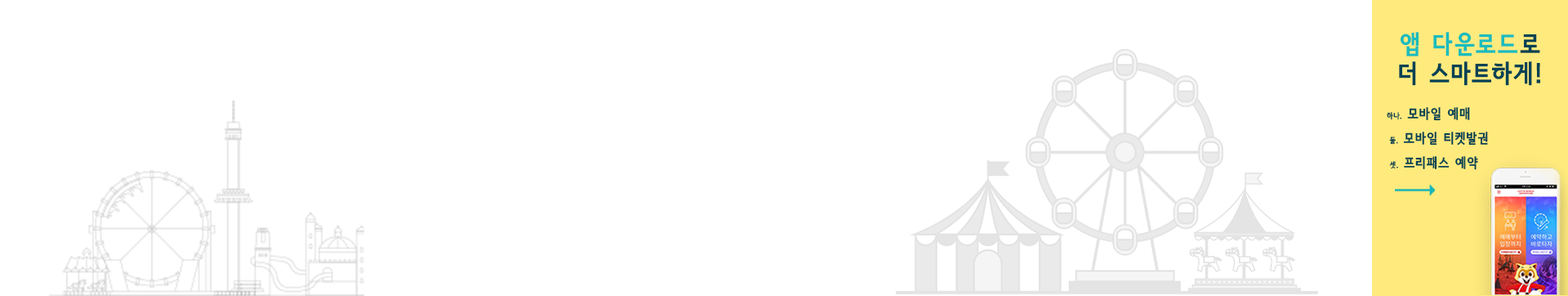
<style>
.page{position:relative;width:1568px;height:296px;background:#ffffff}
.page>*{position:absolute;margin:0}
.t1{font:24.5px "SeN-CBL";letter-spacing:0.1em;color:#014254}
.t2{font:24.5px "SeN-CBL";letter-spacing:0.1em;color:#1abcbd}
.t3{font:13.1px/24.5px "SeN-CBL";letter-spacing:0.1em;color:#014254}
.t4{font:7.3px/24.5px "SeN-CBL";letter-spacing:0.1em;color:#014254}
</style>
<div class="page">
<p class="t1" style="left:1399px;top:32px;width:141px;height:54px;text-align:center"><span class="t2">앱 다운로드</span>로<br>더 스마트하게!</p>
<p class="t3" style="left:1387px;top:107px;width:101px;height:63px"><span class="t4">하나.</span> 모바일 예매<br><span class="t4"> 둘.</span> 모바일 티켓발권<br><span class="t4"> 셋.</span> 프리패스 예약</p>
</div>
